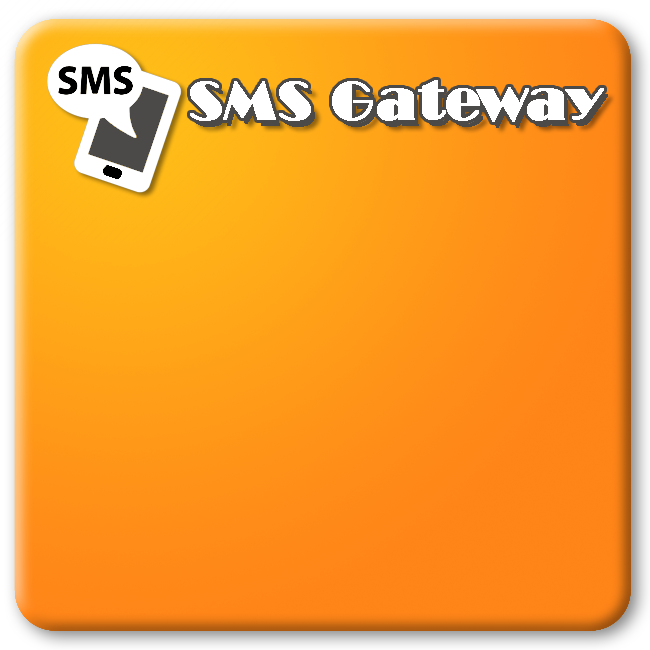
<style>
.page{position:relative;width:650px;height:650px}
.page>*{position:absolute;margin:0}
.t1{font:55.7px "Broadway";letter-spacing:-0.025em;color:#ffffff;font-weight:bold}
.t2{font:55.7px "Broadway";letter-spacing:-0.025em;font-weight:bold}
</style>
<div class="page">
<p class="t1" style="left:190px;top:80px;width:414px;height:42px">SMS Gateway</p>
<p class="t2" style="left:194px;top:86px;width:414px;height:42px">SMS Gateway</p>
</div>
